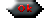
<style>
.page{position:relative;width:52px;height:18px;background:#ffffff}
.page>*{position:absolute;margin:0}
.t1{font:10px "LucidaSansUnicode";font-weight:bold}
</style>
<div class="page">
<p class="t1" style="left:18px;top:4px;width:14px;height:8px">Ok</p>
</div>
